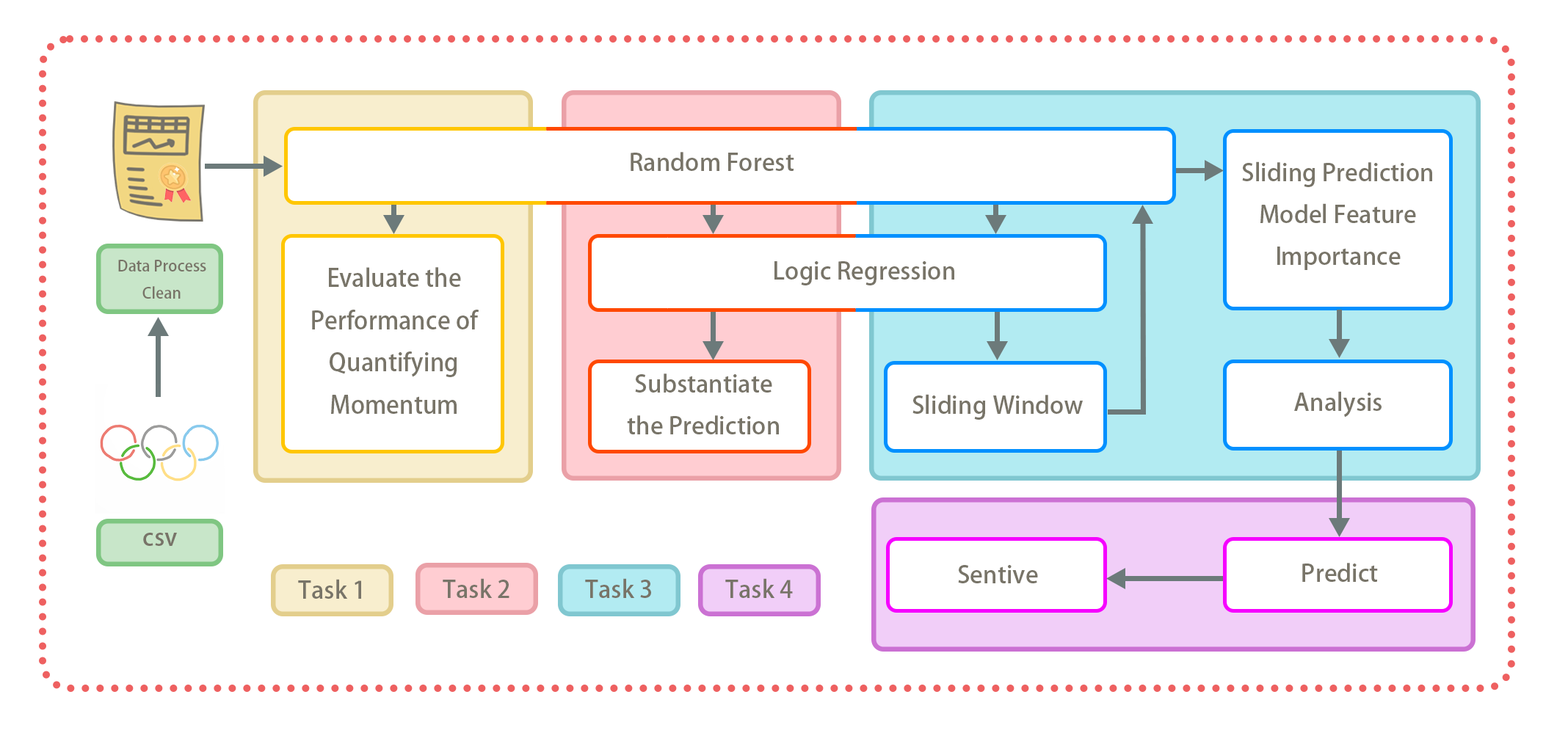
<style>
.page{position:relative;width:1568px;height:733px;background:#ffffff}
.page>*{position:absolute;margin:0}
.t1{font:24px "AdobeHeitiStd-Regular";color:#787468}
.t2{font:15.4px "AdobeHeitiStd-Regular";color:#787468}
.t3{font:24.2px "AdobeHeitiStd-Regular";color:#787468}
</style>
<div class="page">
<p class="t1" style="left:631px;top:152px;width:163px;height:19px">Random Forest</p>
<p class="t1" style="left:1242px;top:161px;width:190px;height:109px;text-align:center">Sliding Prediction Model Feature Importance</p>
<p class="t2" style="left:118px;top:260px;width:88px;height:39px;text-align:center">Data Process <br>Clean</p>
<p class="t3" style="left:312px;top:267px;width:167px;height:147px;text-align:center">Evaluate the Performance of Quantifying Momentum</p>
<p class="t1" style="left:774px;top:261px;width:180px;height:25px">Logic Regression</p>
<p class="t1" style="left:627px;top:374px;width:152px;height:61px;text-align:center">Substantiate<br>the Prediction</p>
<p class="t1" style="left:912px;top:394px;width:171px;height:26px">Sliding Window</p>
<p class="t1" style="left:1294px;top:391px;width:88px;height:27px">Analysis</p>
<p class="t1" style="left:143px;top:533px;width:34px;height:13px">csv</p>
<p class="t1" style="left:958px;top:565px;width:80px;height:19px">Sentive</p>
<p class="t1" style="left:1302px;top:563px;width:76px;height:19px">Predict</p>
<p class="t1" style="left:298px;top:579px;width:63px;height:20px">Task 1</p>
<p class="t1" style="left:443px;top:578px;width:66px;height:20px">Task 2</p>
<p class="t1" style="left:585px;top:578px;width:66px;height:20px">Task 3</p>
<p class="t1" style="left:725px;top:578px;width:68px;height:20px">Task 4</p>
</div>
